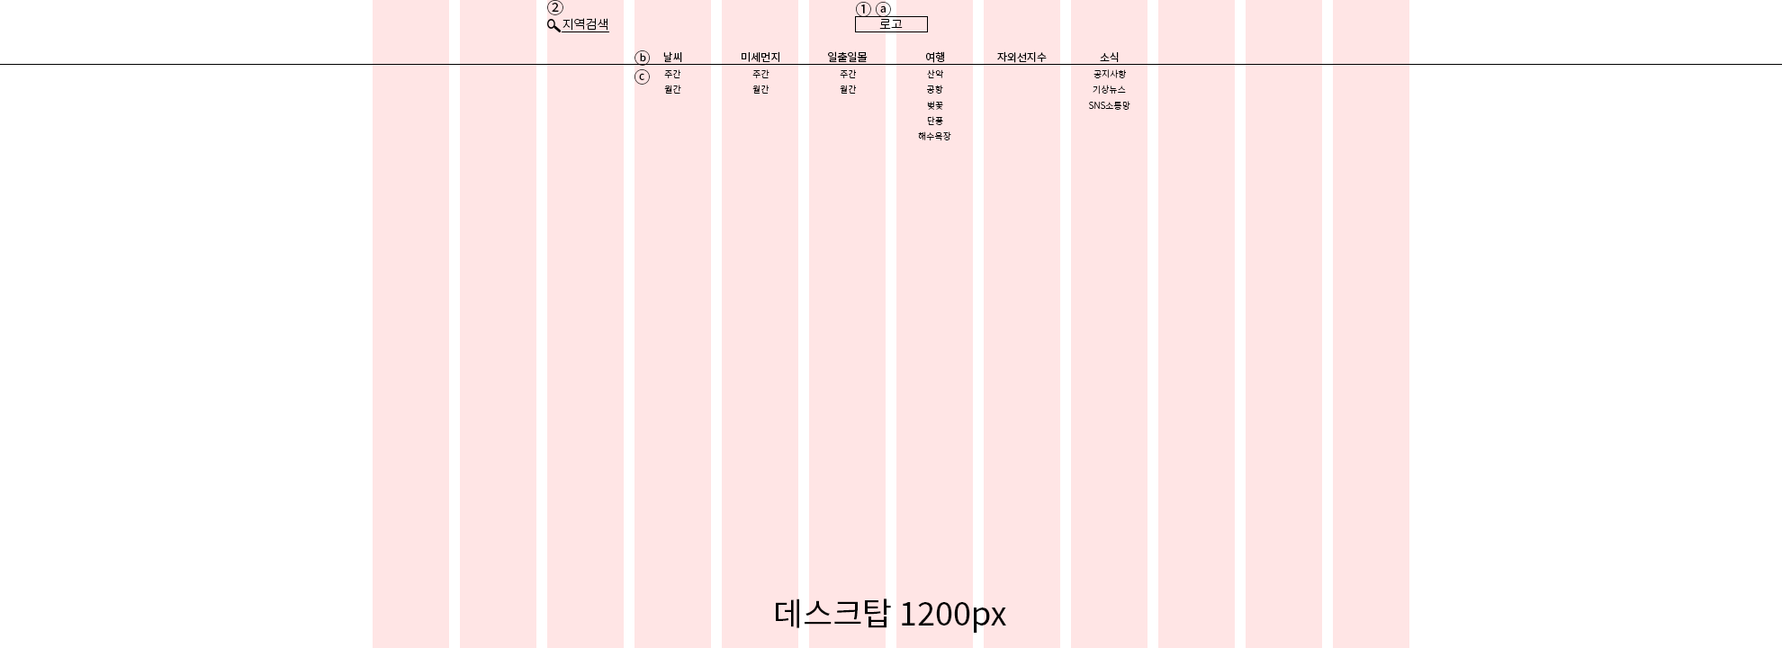
<style>
.page{position:relative;width:1782px;height:648px;background:#ffe5e5}
.page>*{position:absolute;margin:0}
.t1{font:16.2px "NotoSansKR-Regular";color:#000000}
.t2{font:12.6px "NotoSansKR-Light";color:#000000}
.t3{font:10.8px "NotoSansKR-Regular";color:#000000}
.t4{font:9px "NotoSansKR-Light";color:#000000}
.t5{font:32.4px "NotoSansKR-Regular";color:#000000}
</style>
<div class="page">
<p class="t1" style="left:547px;top:0px;width:16px;height:15px">②</p>
<p class="t1" style="left:856px;top:2px;width:35px;height:15px">① ⓐ</p>
<p class="t2" style="left:562px;top:18px;width:46px;height:13px">지역검색</p>
<p class="t2" style="left:879px;top:19px;width:24px;height:10px">로고</p>
<p class="t1" style="left:634px;top:50px;width:16px;height:16px">ⓑ</p>
<p class="t3" style="left:663px;top:51px;width:19px;height:11px">날씨</p>
<p class="t3" style="left:742px;top:51px;width:37px;height:12px">미세먼지</p>
<p class="t3" style="left:828px;top:51px;width:40px;height:11px">일출일몰</p>
<p class="t3" style="left:926px;top:51px;width:19px;height:12px">여행</p>
<p class="t3" style="left:997px;top:51px;width:50px;height:12px">자외선지수</p>
<p class="t3" style="left:1100px;top:52px;width:19px;height:10px">소식</p>
<p class="t1" style="left:634px;top:69px;width:16px;height:16px">ⓒ</p>
<p class="t4" style="left:664px;top:69px;width:16px;height:9px">주간</p>
<p class="t4" style="left:752px;top:69px;width:18px;height:9px">주간</p>
<p class="t4" style="left:840px;top:69px;width:16px;height:9px">주간</p>
<p class="t4" style="left:927px;top:69px;width:16px;height:9px">산악</p>
<p class="t4" style="left:1094px;top:69px;width:32px;height:9px">공지사항</p>
<p class="t4" style="left:664px;top:85px;width:17px;height:9px">월간</p>
<p class="t4" style="left:752px;top:85px;width:17px;height:9px">월간</p>
<p class="t4" style="left:840px;top:85px;width:16px;height:9px">월간</p>
<p class="t4" style="left:927px;top:85px;width:16px;height:9px">공항</p>
<p class="t4" style="left:1093px;top:85px;width:33px;height:9px">기상뉴스</p>
<p class="t4" style="left:927px;top:101px;width:16px;height:9px">벚꽃</p>
<p class="t4" style="left:1089px;top:101px;width:41px;height:9px">SNS소통망</p>
<p class="t4" style="left:927px;top:116px;width:16px;height:9px">단풍</p>
<p class="t4" style="left:918px;top:131px;width:33px;height:10px">해수욕장</p>
<p class="t5" style="left:776px;top:598px;width:230px;height:35px">데스크탑 1200px</p>
</div>
